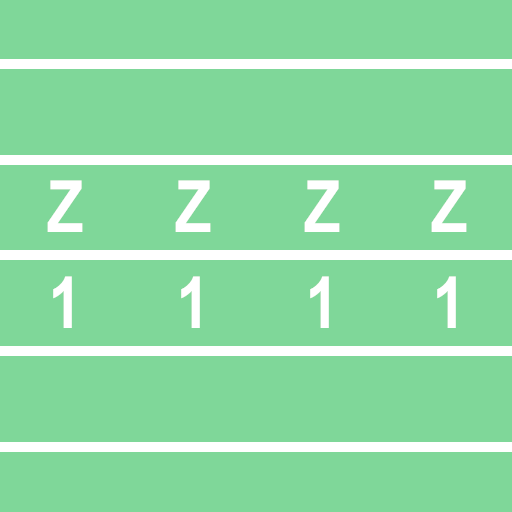
<style>
.page{position:relative;width:512px;height:512px;background:#7fd799}
.page>*{position:absolute;margin:0}
.t1{font:72px "ArialNarrow-Bold";color:#ffffff}
</style>
<div class="page">
<p class="t1" style="left:47px;top:180px;width:36px;height:52px">Z</p>
<p class="t1" style="left:175px;top:180px;width:36px;height:52px">Z</p>
<p class="t1" style="left:304px;top:180px;width:36px;height:52px">Z</p>
<p class="t1" style="left:431px;top:180px;width:36px;height:52px">Z</p>
<p class="t1" style="left:53px;top:276px;width:19px;height:52px">1</p>
<p class="t1" style="left:181px;top:276px;width:19px;height:52px">1</p>
<p class="t1" style="left:310px;top:276px;width:19px;height:52px">1</p>
<p class="t1" style="left:437px;top:276px;width:19px;height:52px">1</p>
</div>
